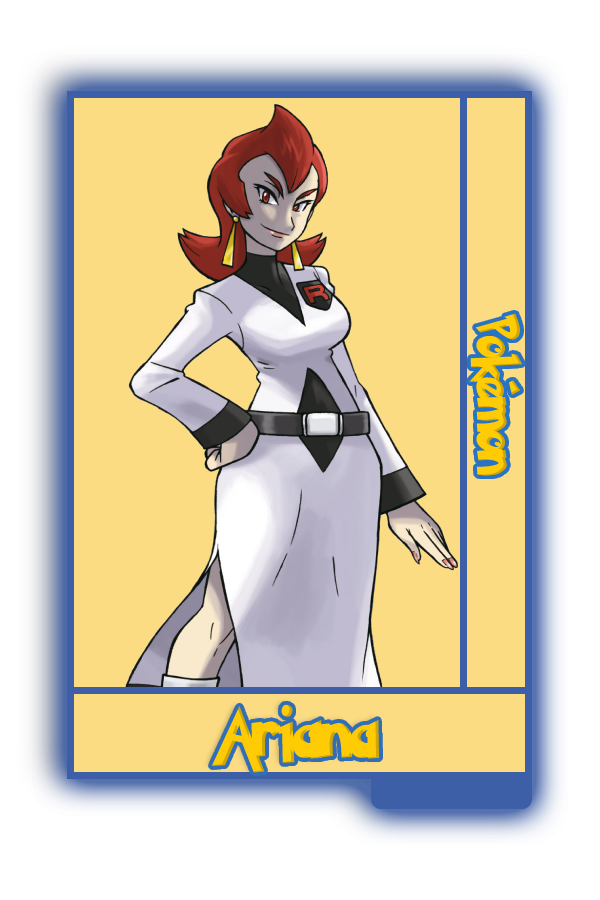
<style>
.page{position:relative;width:600px;height:900px;background:#fbdc83}
.page>*{position:absolute;margin:0}
.t1{font:48.8px "PokemonSolidNormal";color:#ffcb05;scale:0.8 1}
.t2{font:56.6px "PokemonSolidNormal";color:#ffcb05;scale:0.92 1}
</style>
<div class="page">
<p class="t1" style="left:469px;top:313px;width:54px;height:163px;rotate:90deg">Pokémon</p>
<p class="t2" style="left:211px;top:704px;width:169px;height:69px">Ariana</p>
</div>
